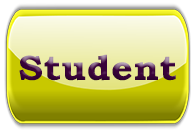
<style>
.page{position:relative;width:195px;height:133px}
.page>*{position:absolute;margin:0}
.t1{font:34.9px "BookmanOldStyle-Bold";letter-spacing:0.02em;color:#3a033b;scale:1.07 1}
</style>
<div class="page">
<p class="t1" style="left:19px;top:54px;width:157px;height:27px">Student</p>
</div>
